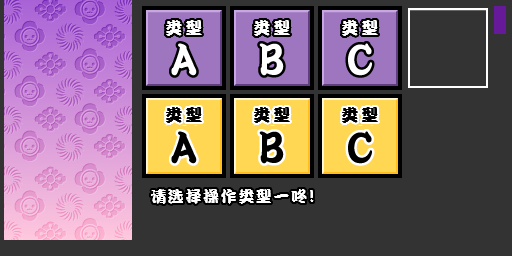
<style>
.page{position:relative;width:512px;height:256px;background:#333333}
.page>*{position:absolute;margin:0}
.t1{font:17px "DFPKanTingLiuW9";letter-spacing:0.2em;color:#ffffff}
.t2{font:17px "DFPKanTingLiuW9";letter-spacing:0.2em;color:#000000}
.t3{font:16px "DFPKanTingLiuW9";letter-spacing:0.1em;color:#ffffff}
.t4{font:18px "DFPKanTingLiuW9";letter-spacing:0.1em;color:#ffffff}
</style>
<div class="page">
<p class="t1" style="left:166px;top:20px;width:36px;height:16px">类型</p>
<p class="t1" style="left:254px;top:20px;width:36px;height:16px">类型</p>
<p class="t1" style="left:342px;top:20px;width:36px;height:16px">类型</p>
<p class="t2" style="left:166px;top:107px;width:36px;height:16px">类型</p>
<p class="t2" style="left:254px;top:107px;width:36px;height:16px">类型</p>
<p class="t2" style="left:342px;top:107px;width:36px;height:16px">类型</p>
<p class="t3" style="left:151px;top:189px;width:163px;height:15px">请选择操作类型一咚<span class="t4">!</span></p>
</div>
